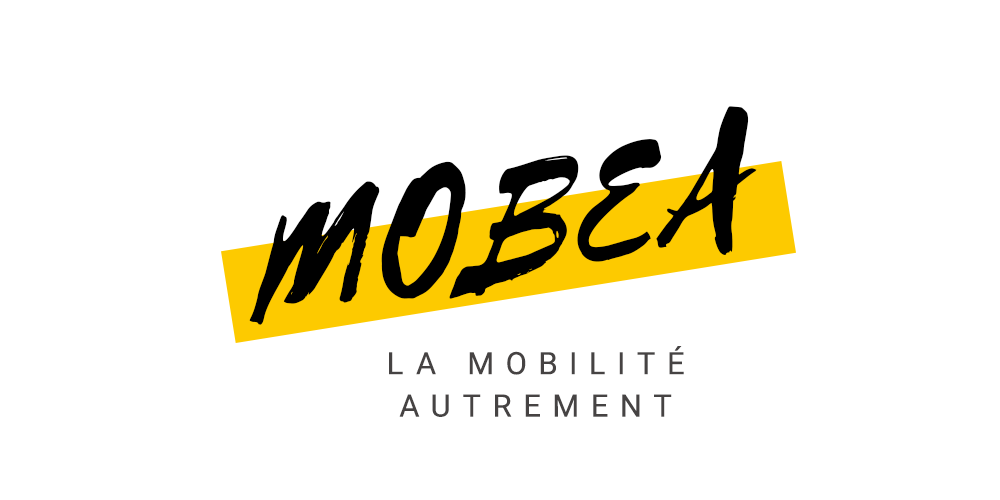
<style>
.page{position:relative;width:1000px;height:500px;background:#ffffff}
.page>*{position:absolute;margin:0}
.t1{font:190.5px "Selima";letter-spacing:0.025em;color:#000000;font-style:italic}
.t2{font:52.9px/42.3px "Roboto-Regular";letter-spacing:0.38em;color:#464343;font-variant:small-caps}
</style>
<div class="page">
<p class="t1" style="left:249px;top:106px;width:508px;height:219px;rotate:-9deg">MOBEA</p>
<p class="t2" style="left:389px;top:346px;width:295px;height:71px;text-align:center">LA MOBILITÉ <br>AUTREMENT</p>
</div>
